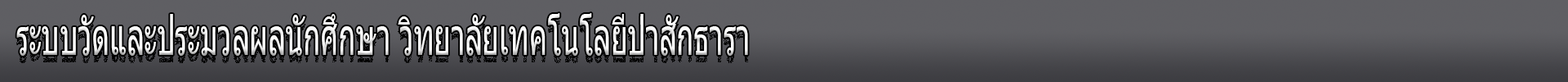
<style>
.page{position:relative;width:1568px;height:82px}
.page>*{position:absolute;margin:0}
.t1{font:50.2px "Tahoma";letter-spacing:-0.005em;color:#ffffff;scale:0.58 1}
</style>
<div class="page">
<p class="t1" style="left:16px;top:13px;width:732px;height:43px">ระบบวัดและประมวลผลนักศึกษา วิทยาลัยเทคโนโลยีป่่าสักธารา</p>
</div>
